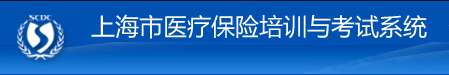
<style>
.page{position:relative;width:449px;height:75px;background:#0051b2}
.page>*{position:absolute;margin:0}
.t1{font:24px "MicrosoftYaHei";color:#ffffff}
</style>
<div class="page">
<p class="t1" style="left:91px;top:14px;width:336px;height:25px">上海市医疗保险培训与考试系统</p>
</div>
